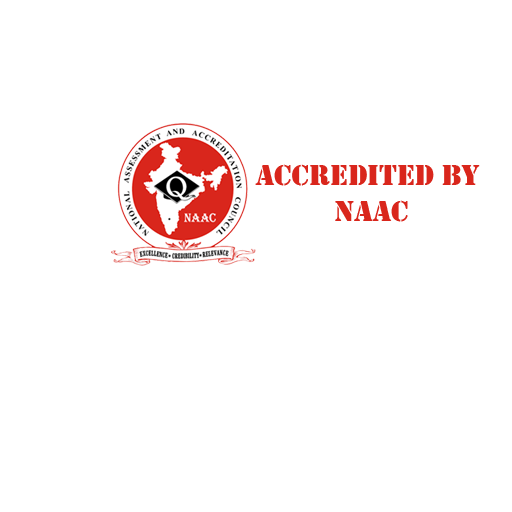
<style>
.page{position:relative;width:512px;height:512px;background:#ffffff}
.page>*{position:absolute;margin:0}
.t1{font:30px "Stencil";color:#d9261c}
</style>
<div class="page">
<p class="t1" style="left:255px;top:164px;width:225px;height:58px;text-align:center">accredited by<br> naac</p>
</div>
